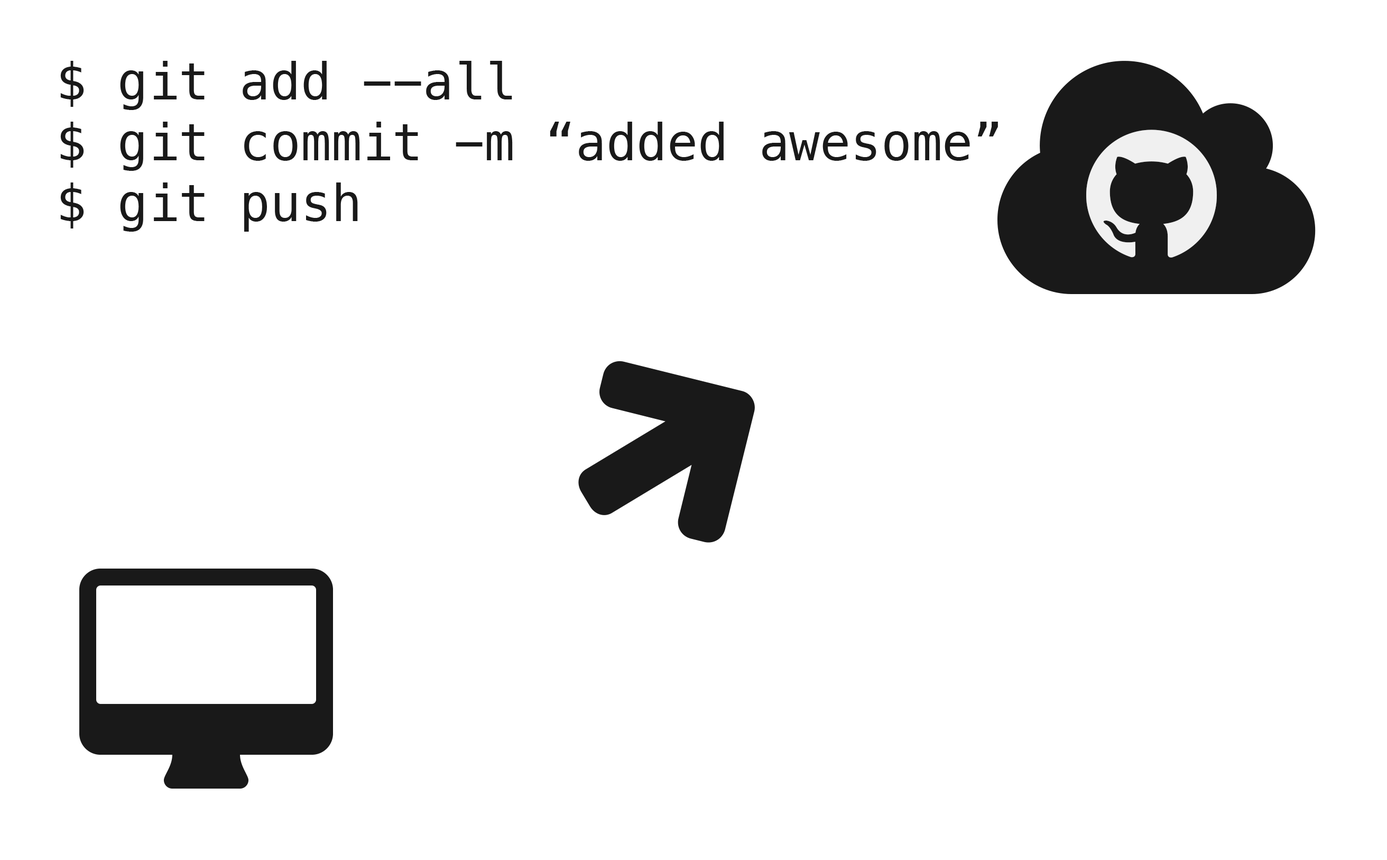
<style>
.page{position:relative;width:1387px;height:860px;background:#ffffff}
.page>*{position:absolute;margin:0}
.t1{font:50.8px "Menlo-Regular";color:#191919}
</style>
<div class="page">
<p class="t1" style="left:60px;top:61px;width:938px;height:171px">$ git add --all<br>$ git commit -m “added awesome”<br>$ git push</p>
</div>
